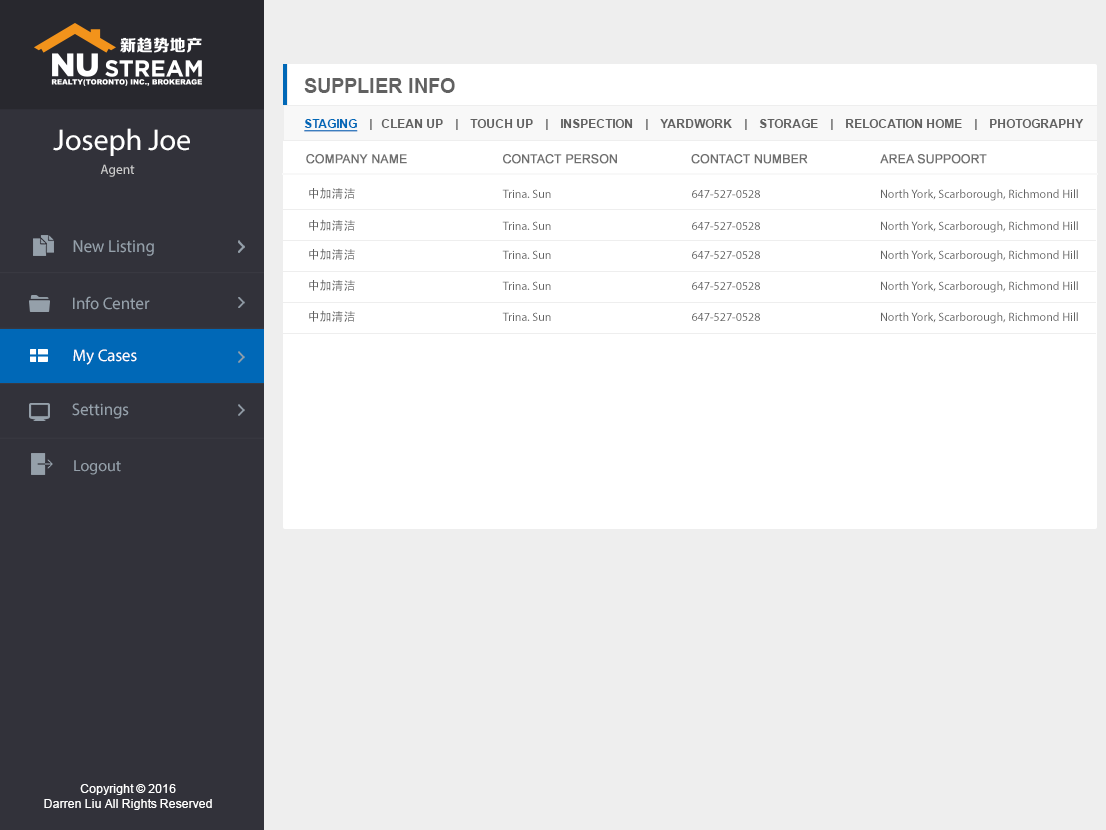
<style>
.page{position:relative;width:1106px;height:830px;background:#ffffff}
.page>*{position:absolute;margin:0}
.t1{font:20px "Arial-BoldMT";color:#616161}
.t2{font:12px "Arial-BoldMT";color:#616161;text-transform:uppercase}
.t3{font:12px "Arial-BoldMT";color:#0068b7;text-transform:uppercase;text-decoration:underline}
.t4{font:30px "MyriadPro-Regular";color:#ffffff}
.t5{font:12px "ArialMT";color:#6f6f6f;text-transform:uppercase;font-weight:bold}
.t6{font:13.4px "MyriadPro-Regular";color:#cccccc}
.t7{font:17.6px "MyriadPro-Regular";color:#95a0aa;scale:0.96 1}
.t8{font:16.8px "MyriadPro-Regular";color:#95a0aa}
.t9{font:16.8px "MyriadPro-Regular";color:#ffffff}
.t10{font:16px "MyriadPro-Regular";color:#95a0aa}
.t11{font:12px "ArialMT";color:#ffffff}
</style>
<div class="page">
<p class="t1" style="left:304px;top:78px;width:151px;height:15px">SUPPLIER INFO</p>
<p class="t2" style="left:304px;top:119px;width:780px;height:13px"><span class="t3">STAGING</span>    |   cLEAN UP    |    TOUCH UP    |    INSPECTION    |    YARDWORK    |    STORAGE    |    RELOCATION HOME    |    photography</p>
<p class="t4" style="left:53px;top:128px;width:137px;height:28px">Joseph Joe</p>
<p class="t5" style="left:306px;top:154px;width:681px;height:10px">Company Name                          CONTACT person                    CONTACT NUMBER                    AREA SUPPOORT</p>
<p class="t6" style="left:100px;top:164px;width:35px;height:13px">Agent</p>
<p class="t7" style="left:73px;top:240px;width:81px;height:16px">New Listing</p>
<p class="t8" style="left:73px;top:296px;width:77px;height:14px">Info Center</p>
<p class="t9" style="left:73px;top:349px;width:64px;height:16px">My Cases</p>
<p class="t8" style="left:72px;top:403px;width:57px;height:16px">Settings</p>
<p class="t10" style="left:74px;top:460px;width:47px;height:15px">Logout</p>
<p class="t11" style="left:44px;top:784px;width:168px;height:26px;text-align:center">Copyright © 2016<br>Darren Liu All Rights Reserved</p>
</div>
